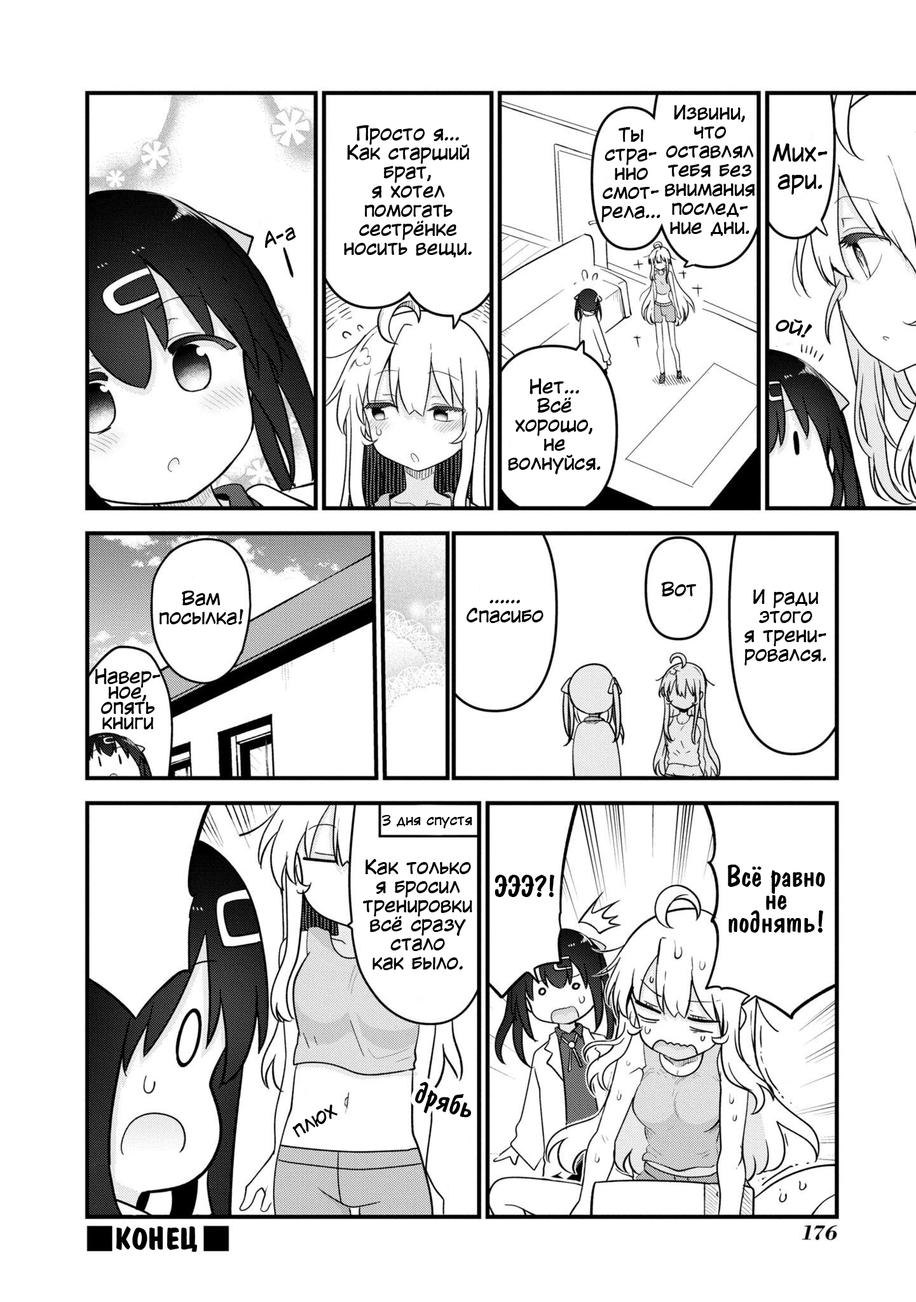
<style>
.page{position:relative;width:916px;height:1302px;background:#ffffff}
.page>*{position:absolute;margin:0}
.t1{font:19.1px/19.1px "KuraiVoice2";color:#000000}
.t2{font:22.9px "KuraiVoice2";color:#000000}
.t3{font:19.1px "KuraiVoice2";color:#000000}
.t4{font:19.1px/15.3px "KuraiVoice2";color:#000000}
.t5{font:13.3px "KuraiVoice2";color:#000000}
.t6{font:30.5px/22.9px "ADomIno";color:#000000}
.t7{font:30.5px "ADomIno";color:#000000}
.t8{font:30.5px "ADomInoBold";color:#000000}
</style>
<div class="page">
<p class="t1" style="left:665px;top:104px;width:90px;height:132px;text-align:center">Извини,<br>что<br>оставлял<br>тебя без<br>внимания<br>послед-<br>ние дни.</p>
<p class="t1" style="left:344px;top:125px;width:128px;height:132px;text-align:center">Просто я...<br>Как старший<br>брат,<br>я хотел<br>помогать<br>сестрёнке<br>носить вещи.</p>
<p class="t1" style="left:601px;top:127px;width:59px;height:95px;text-align:center">Ты<br>стра-<br>нно<br>смот-<br>рела...</p>
<p class="t2" style="left:772px;top:143px;width:56px;height:52px;text-align:center">Мих-<br>ари.</p>
<p class="t3" style="left:264px;top:227px;width:32px;height:21px;rotate:-16deg">А-а</p>
<p class="t3" style="left:775px;top:319px;width:37px;height:19px;rotate:14deg">ой!</p>
<p class="t1" style="left:508px;top:378px;width:93px;height:96px;text-align:center">Нет...<br>Всё<br>хорошо,<br>не<br>волнуйся.</p>
<p class="t3" style="left:661px;top:582px;width:36px;height:14px">Вот</p>
<p class="t1" style="left:159px;top:591px;width:84px;height:34px;text-align:center">Вам<br>посылка!</p>
<p class="t1" style="left:744px;top:589px;width:82px;height:77px;text-align:center">И ради<br>этого<br>я трени-<br>ровался.</p>
<p class="t1" style="left:467px;top:599px;width:76px;height:24px;text-align:center">......<br>Спасибо</p>
<p class="t4" style="left:95px;top:668px;width:65px;height:62px;text-align:center">Навер-<br>ное,<br>опять<br>книги</p>
<p class="t5" style="left:382px;top:815px;width:90px;height:13px">3 дня спустя</p>
<p class="t1" style="left:363px;top:859px;width:109px;height:111px;text-align:center">Как только<br>я бросил<br>тренировки<br>всё сразу<br>стало<br>как было.</p>
<p class="t6" style="left:728px;top:864px;width:97px;height:69px;text-align:center">Всё равно<br>не<br>поднять!</p>
<p class="t7" style="left:495px;top:875px;width:59px;height:22px">ЭЭЭ?!</p>
<p class="t7" style="left:415px;top:1082px;width:56px;height:35px;rotate:17deg">дрябь</p>
<p class="t3" style="left:292px;top:1104px;width:46px;height:33px;rotate:-31deg">плюх</p>
<p class="t8" style="left:116px;top:1226px;width:81px;height:26px">КОНЕЦ</p>
</div>
